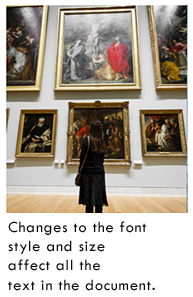
<style>
.page{position:relative;width:193px;height:297px;background:#ffffff}
.page>*{position:absolute;margin:0}
.t1{font:16px "TwCenMT-Regular";letter-spacing:0.05em;color:#0d0b0b}
</style>
<div class="page">
<p class="t1" style="left:8px;top:221px;width:147px;height:70px">Changes to the font <br>style and size <br>affect all the <br>text in the document.</p>
</div>
